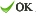
<style>
.page{position:relative;width:36px;height:13px;background:#ffffff}
.page>*{position:absolute;margin:0}
.t1{font:12px "TimesNewRomanPSMT";letter-spacing:-0.005em;color:#31372c}
</style>
<div class="page">
<p class="t1" style="left:16px;top:2px;width:17px;height:10px">OK</p>
<p class="t1" style="left:16px;top:2px;width:17px;height:10px">OK</p>
</div>
